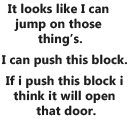
<style>
.page{position:relative;width:128px;height:128px;background:#ffffff}
.page>*{position:absolute;margin:0}
.t1{font:12.5px "MicrosoftPhagsPa-Bold";letter-spacing:0.01em;color:#1e1e1e}
</style>
<div class="page">
<p class="t1" style="left:7px;top:3px;width:102px;height:44px;text-align:center">It looks like I can <br>jump on those <br>thing’s.</p>
<p class="t1" style="left:1px;top:54px;width:126px;height:14px">I can push this block.</p>
<p class="t1" style="left:5px;top:75px;width:118px;height:41px;text-align:center">If i push this block i <br>think it will open <br>that door.</p>
</div>
